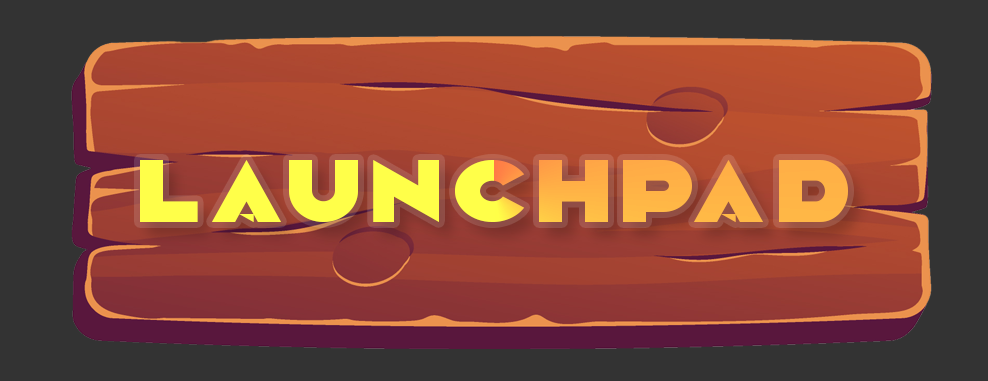
<style>
.page{position:relative;width:988px;height:381px;background:#333333}
.page>*{position:absolute;margin:0}
.t1{font:108.3px "DFVN-Camar-Regular";letter-spacing:0.1em}
</style>
<div class="page">
<p class="t1" style="left:140px;top:159px;width:708px;height:64px">Launchpad</p>
</div>
